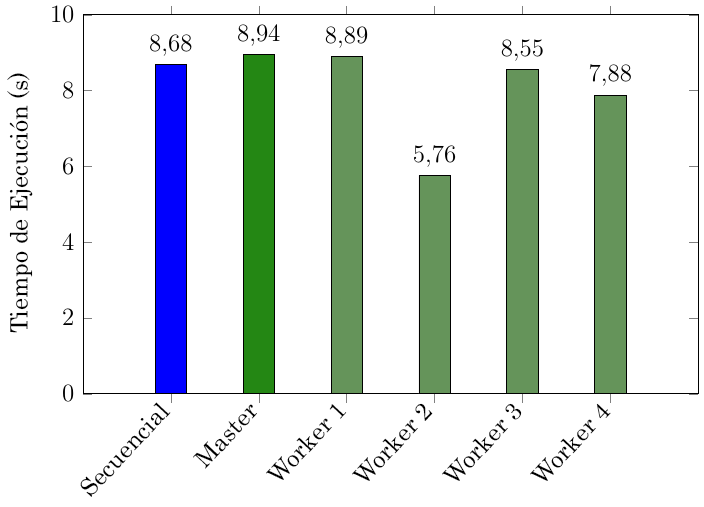
<style>
.page{position:relative;width:704px;height:507px;background:#ffffff}
.page>*{position:absolute;margin:0}
.t1{font:24px "Century";color:#000000}
</style>
<div class="page">
<p class="t1" style="left:7px;top:73px;width:26px;height:260px;rotate:-90deg">Tiempo de Ejecución (s)</p>
<p class="t1" style="left:80px;top:402px;width:91px;height:95px;rotate:-47deg">Secuencial</p>
<p class="t1" style="left:193px;top:404px;width:64px;height:65px;rotate:-47deg">Master</p>
<p class="t1" style="left:266px;top:404px;width:81px;height:76px;rotate:-47deg">Worker 1</p>
<p class="t1" style="left:352px;top:403px;width:81px;height:78px;rotate:-47deg">Worker 2</p>
<p class="t1" style="left:442px;top:403px;width:80px;height:78px;rotate:-47deg">Worker 3</p>
<p class="t1" style="left:530px;top:403px;width:81px;height:78px;rotate:-47deg">Worker 4</p>
</div>
